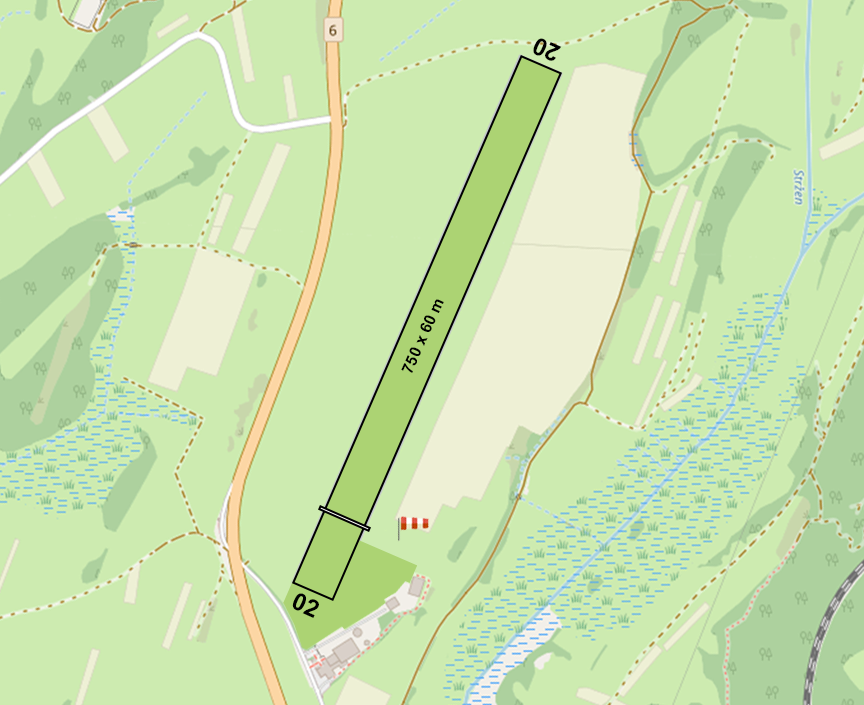
<style>
.page{position:relative;width:864px;height:705px;background:#cdebb0}
.page>*{position:absolute;margin:0}
.t1{font:24px "Arial-BoldMT";color:#000000}
.t2{font:16px "Arial-BoldMT";color:#000000}
</style>
<div class="page">
<p class="t1" style="left:533px;top:38px;width:29px;height:23px;rotate:-156deg">20</p>
<p class="t2" style="left:401px;top:299px;width:43px;height:74px;rotate:-66deg">750 x 60 m</p>
<p class="t1" style="left:292px;top:593px;width:27px;height:25px;rotate:24deg">02</p>
</div>
